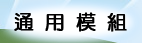
<style>
.page{position:relative;width:142px;height:43px}
.page>*{position:absolute;margin:0}
.t1{font:20px "DFYuan-W5-WIN-BF";color:#000000;font-weight:bold}
</style>
<div class="page">
<p class="t1" style="left:14px;top:12px;width:113px;height:20px">通 用 模 組</p>
</div>
